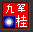
<style>
.page{position:relative;width:33px;height:32px;background:#f20000}
.page>*{position:absolute;margin:0}
.t1{font:10.4px "SimSun";color:#ffffff}
.t2{font:11.7px "SimSun";color:#ffffff}
</style>
<div class="page">
<p class="t1" style="left:6px;top:4px;width:19px;height:9px">九军</p>
<p class="t2" style="left:16px;top:15px;width:11px;height:12px">桂</p>
</div>
